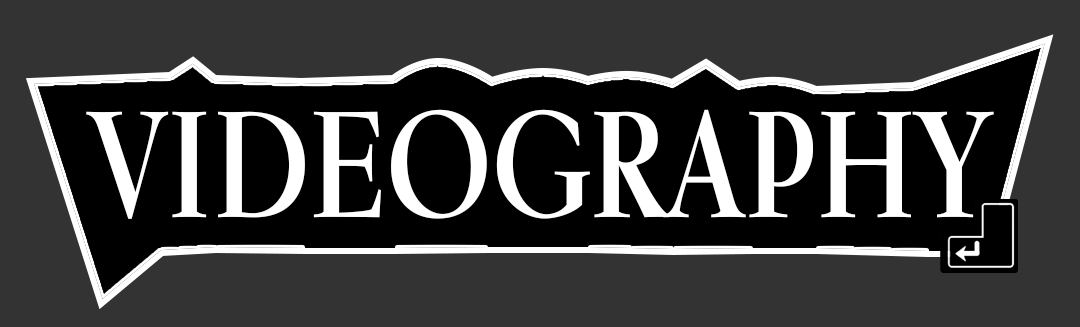
<style>
.page{position:relative;width:1080px;height:327px;background:#333333}
.page>*{position:absolute;margin:0}
.t1{font:150px "KumlienPro-Condensed";color:#ffffff}
</style>
<div class="page">
<p class="t1" style="left:86px;top:109px;width:908px;height:110px">VIDEOGRAPHY</p>
</div>
